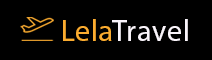
<style>
.page{position:relative;width:212px;height:60px;background:#000000}
.page>*{position:absolute;margin:0}
.t1{font:30px "MyriadPro-Regular";letter-spacing:0.025em;color:#faf5fb}
.t2{font:30px "MyriadPro-Regular";letter-spacing:0.025em;color:#fbac30}
</style>
<div class="page">
<p class="t1" style="left:63px;top:19px;width:125px;height:22px"><span class="t2">Lela</span>Travel</p>
</div>
